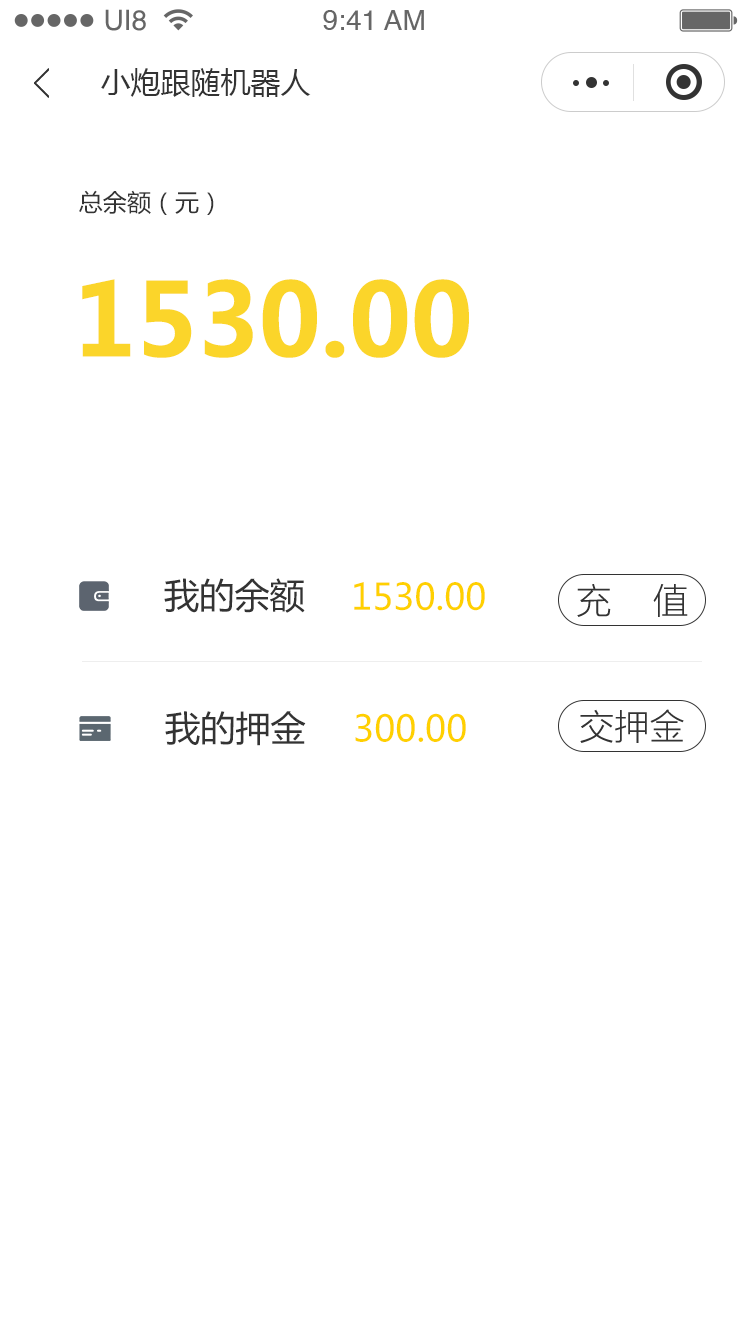
<style>
.page{position:relative;width:750px;height:1334px;background:#ffffff}
.page>*{position:absolute;margin:0}
.t1{font:28.1px "Helvetica";color:#666666}
.t2{font:30px "MicrosoftYaHei";color:#333333}
.t3{font:24px "MicrosoftYaHei";color:#333333}
.t4{font:100px "MicrosoftYaHei-Bold";color:#fbd52a}
.t5{font:35.2px "MicrosoftYaHei";color:#333333}
.t6{font:36px "MicrosoftYaHei";color:#ffd000}
.t7{font:35.2px "MicrosoftYaHeiLight";color:#333333}
</style>
<div class="page">
<p class="t1" style="left:105px;top:9px;width:41px;height:22px">UI8</p>
<p class="t1" style="left:323px;top:10px;width:101px;height:20px">9:41 AM</p>
<p class="t2" style="left:101px;top:68px;width:210px;height:29px">小炮跟随机器人</p>
<p class="t3" style="left:79px;top:190px;width:135px;height:25px">总余额（元）</p>
<p class="t4" style="left:82px;top:279px;width:387px;height:79px">1530.00</p>
<p class="t5" style="left:164px;top:578px;width:141px;height:35px">我的余额</p>
<p class="t6" style="left:354px;top:582px;width:131px;height:29px">1530.00</p>
<p class="t7" style="left:577px;top:584px;width:111px;height:33px">充    值</p>
<p class="t5" style="left:165px;top:711px;width:141px;height:35px">我的押金</p>
<p class="t6" style="left:355px;top:713px;width:111px;height:29px">300.00</p>
<p class="t7" style="left:580px;top:709px;width:104px;height:34px">交押金</p>
</div>
